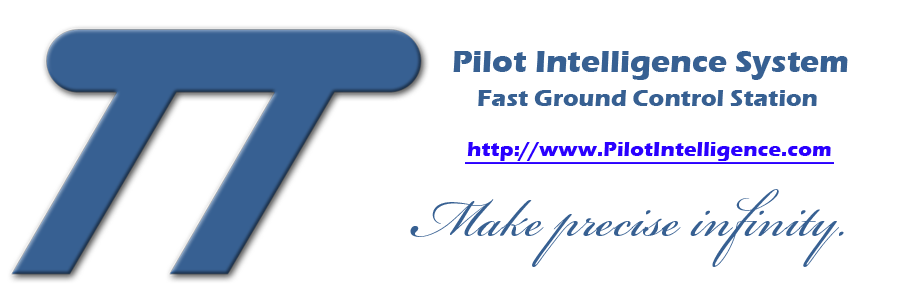
<style>
.page{position:relative;width:904px;height:300px;background:#ffffff}
.page>*{position:absolute;margin:0}
.t1{font:32px "ErasITC-Bold";color:#376092}
.t2{font:24px "ErasITC-Bold";color:#376092}
.t3{font:21.3px "ErasITC-Bold";color:#2a00ff}
.t4{font:80px "BickhamScriptPro-Regular";color:#376092}
</style>
<div class="page">
<p class="t1" style="left:453px;top:51px;width:395px;height:29px">Pilot Intelligence System</p>
<p class="t2" style="left:478px;top:90px;width:339px;height:16px">Fast Ground Control Station</p>
<p class="t3" style="left:467px;top:142px;width:364px;height:19px">http://www.PilotIntelligence.com</p>
<p class="t4" style="left:410px;top:189px;width:434px;height:78px">Make precise infinity.</p>
</div>
